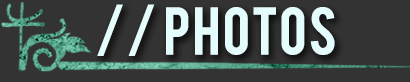
<style>
.page{position:relative;width:410px;height:82px;background:#333333}
.page>*{position:absolute;margin:0}
.t1{font:52.3px "Bebas";color:#e5fcfd;font-weight:bold}
</style>
<div class="page">
<p class="t1" style="left:97px;top:4px;width:238px;height:52px">// PHOTOS</p>
</div>
